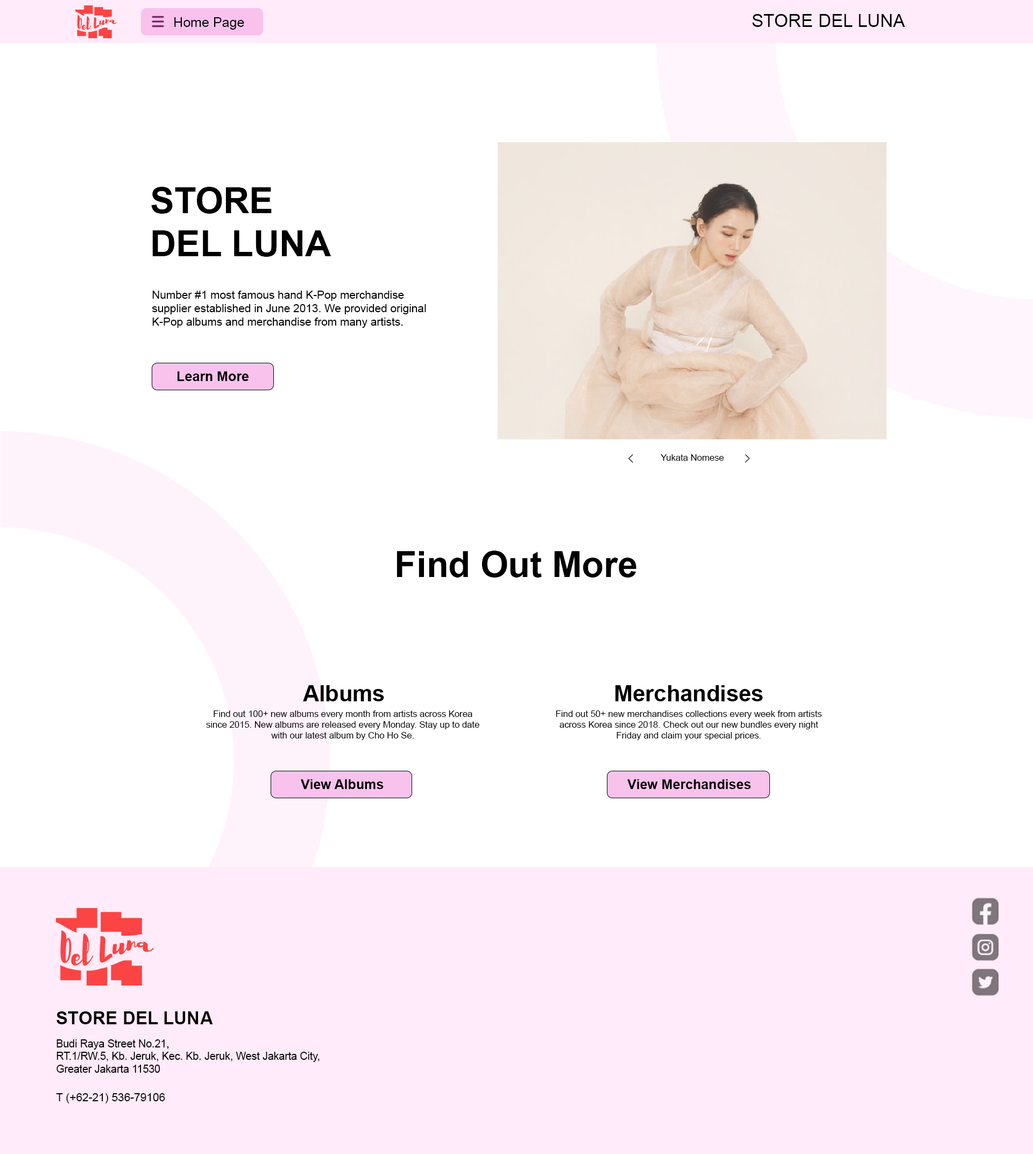
<style>
.page{position:relative;width:1033px;height:1154px;background:#ffffff}
.page>*{position:absolute;margin:0}
.t1{font:13.5px "ArialMT";color:#000000}
.t2{font:17.9px "ArialMT";color:#000000}
.t3{font:35.9px "Arial-BoldMT";color:#000000}
.t4{font:11.2px "ArialMT";color:#000000}
.t5{font:13.5px "Arial-BoldMT";color:#000000}
.t6{font:9px "ArialMT";color:#000000}
.t7{font:22.4px "Arial-BoldMT";color:#000000}
.t8{font:13.5px "Arial-BoldMT";color:#010101}
.t9{font:17.9px "Arial-BoldMT";color:#000000;text-transform:uppercase}
.t10{font:10.5px "ArialMT";color:#000000}
</style>
<div class="page">
<p class="t1" style="left:174px;top:17px;width:70px;height:13px">Home Page</p>
<p class="t2" style="left:752px;top:14px;width:153px;height:13px">STORE DEL LUNA</p>
<p class="t3" style="left:151px;top:187px;width:181px;height:70px">STORE<br>DEL LUNA</p>
<p class="t4" style="left:152px;top:291px;width:274px;height:37px">Number #1 most famous hand K-Pop merchandise supplier established in June 2013. We provided original K-Pop albums and merchandise from many artists.</p>
<p class="t5" style="left:178px;top:371px;width:71px;height:10px">Learn More</p>
<p class="t6" style="left:661px;top:454px;width:63px;height:7px">Yukata Nomese</p>
<p class="t3" style="left:397px;top:551px;width:240px;height:27px">Find Out More</p>
<p class="t7" style="left:303px;top:685px;width:81px;height:16px">Albums</p>
<p class="t7" style="left:615px;top:685px;width:148px;height:16px">Merchandises</p>
<p class="t6" style="left:206px;top:710px;width:274px;height:30px;text-align:center">Find out 100+ new albums every month from artists across Korea since 2015. New albums are released every Monday. Stay up to date with our latest album by Cho Ho Se.</p>
<p class="t6" style="left:556px;top:710px;width:266px;height:30px;text-align:center">Find out 50+ new merchandises collections every week from artists across Korea since 2018. Check out our new bundles every night Friday and claim your special prices.</p>
<p class="t5" style="left:301px;top:779px;width:83px;height:10px">View Albums</p>
<p class="t8" style="left:628px;top:779px;width:123px;height:10px">View Merchandises</p>
<p class="t9" style="left:57px;top:1011px;width:156px;height:13px">STORE DEL LUNA</p>
<p class="t10" style="left:57px;top:1039px;width:263px;height:34px">Budi Raya Street No.21,<br>RT.1/RW.5, Kb. Jeruk, Kec. Kb. Jeruk, West Jakarta City,<br>Greater Jakarta 11530</p>
<p class="t4" style="left:56px;top:1093px;width:109px;height:10px">T (+62-21) 536-79106</p>
</div>
